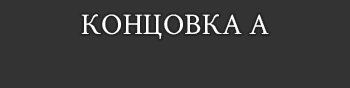
<style>
.page{position:relative;width:350px;height:88px;background:#333333}
.page>*{position:absolute;margin:0}
.t1{font:30px "CrimsonText-Regular";color:#ffffff}
</style>
<div class="page">
<p class="t1" style="left:81px;top:14px;width:188px;height:25px">КОНЦОВКА A</p>
</div>
